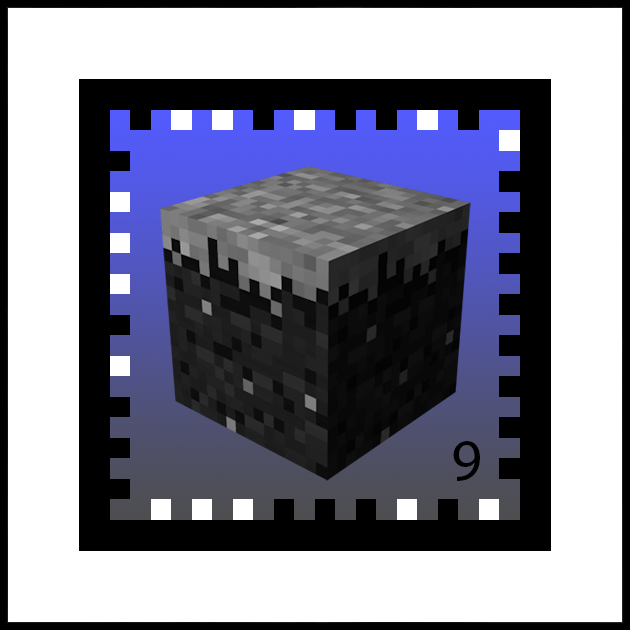
<style>
.page{position:relative;width:630px;height:630px;background:#ffffff}
.page>*{position:absolute;margin:0}
.t1{font:61.1px "MyriadPro-Regular";color:#000000;font-variant:small-caps}
</style>
<div class="page">
<p class="t1" style="left:453px;top:441px;width:27px;height:40px">9</p>
</div>
